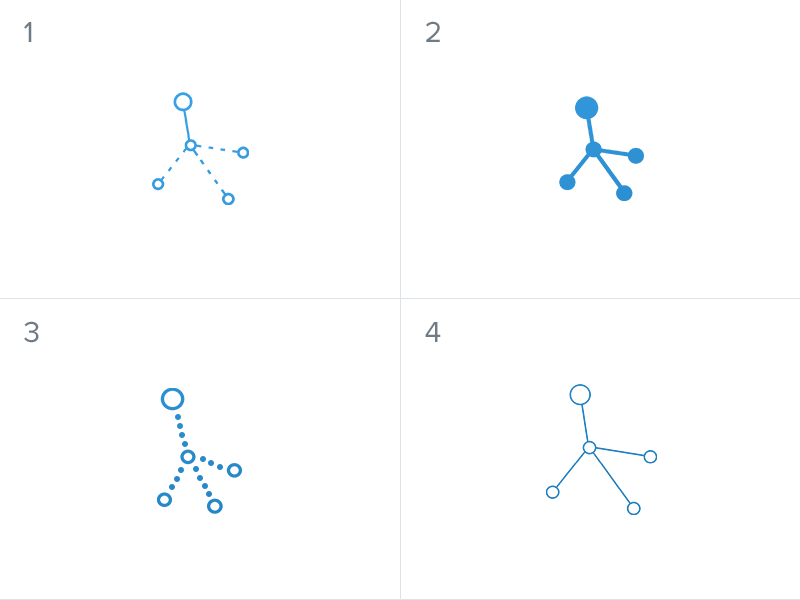
<style>
.page{position:relative;width:800px;height:600px;background:#ffffff}
.page>*{position:absolute;margin:0}
.t1{font:30px "ProximaNova-Regular";letter-spacing:-0.045em;color:#6f7a84}
</style>
<div class="page">
<p class="t1" style="left:24px;top:22px;width:8px;height:20px">1</p>
<p class="t1" style="left:426px;top:21px;width:14px;height:21px">2</p>
<p class="t1" style="left:24px;top:321px;width:15px;height:22px">3</p>
<p class="t1" style="left:425px;top:322px;width:16px;height:20px">4</p>
</div>
